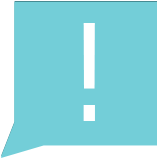
<style>
.page{position:relative;width:158px;height:158px;background:#73ced8}
.page>*{position:absolute;margin:0}
.t1{font:139.9px "TitilliumText25L-400wt";color:#ffffff}
</style>
<div class="page">
<p class="t1" style="left:83px;top:23px;width:12px;height:98px">!</p>
</div>
